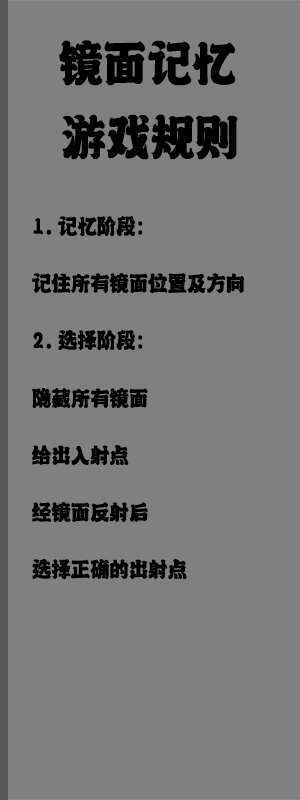
<style>
.page{position:relative;width:300px;height:800px;background:#808080}
.page>*{position:absolute;margin:0}
.t1{font:57.1px "-";letter-spacing:-0.02em;color:#000000;font-weight:bold;scale:0.88 1}
.t2{font:25px/57.1px "-";letter-spacing:-0.02em;color:#000000;font-weight:bold;scale:0.88 1}
</style>
<div class="page">
<p class="t1" style="left:59px;top:40px;width:177px;height:46px">镜面记忆</p>
<p class="t1" style="left:62px;top:114px;width:176px;height:46px">游戏规则</p>
<p class="t2" style="left:32px;top:216px;width:213px;height:363px">1.记忆阶段：<br>记住所有镜面位置及方向<br>2.选择阶段：<br>隐藏所有镜面<br>给出入射点<br>经镜面反射后<br>选择正确的出射点</p>
</div>
